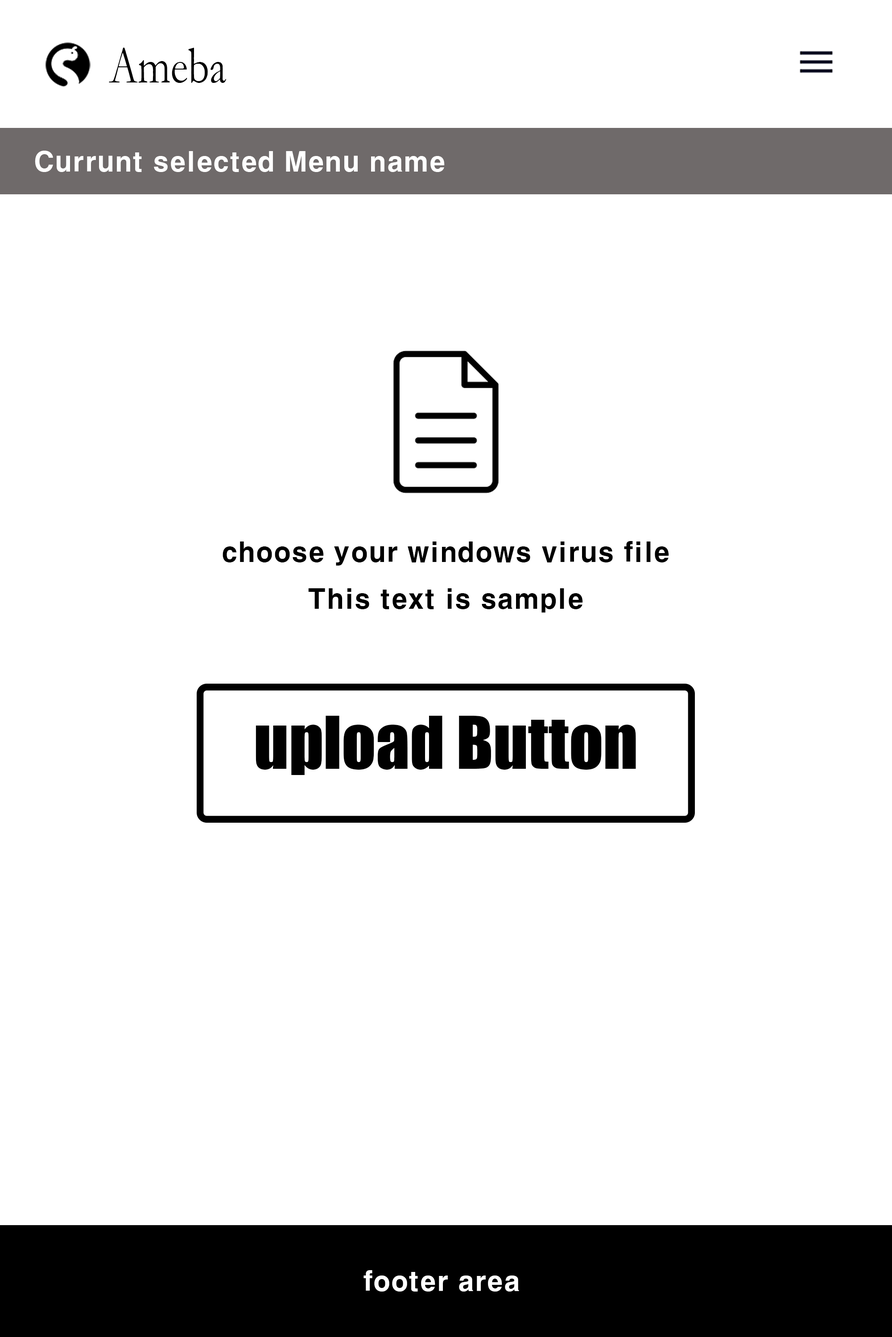
<style>
.page{position:relative;width:892px;height:1337px;background:#ffffff}
.page>*{position:absolute;margin:0}
.t1{font:52.9px "Garamond";color:#000000;scale:0.8 1}
.t2{font:26.7px "H2gtrE";color:#ffffff}
.t3{font:26.7px "H2gtrE";color:#000000}
.t4{font:66.9px "Impact";color:#000000}
</style>
<div class="page">
<p class="t1" style="left:109px;top:48px;width:117px;height:35px">Ameba</p>
<p class="t2" style="left:35px;top:151px;width:409px;height:21px">Currunt selected Menu name</p>
<p class="t3" style="left:222px;top:541px;width:447px;height:72px;text-align:center">choose your windows virus file<br>This text is sample</p>
<p class="t4" style="left:255px;top:716px;width:381px;height:59px">upload Button</p>
<p class="t2" style="left:363px;top:1271px;width:156px;height:21px">footer area</p>
</div>
